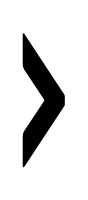
<style>
.page{position:relative;width:88px;height:200px;background:#ffffff}
.page>*{position:absolute;margin:0}
.t1{font:281.6px "Franchise-Bold";color:#000000;scale:0.55 1}
</style>
<div class="page">
<p class="t1" style="left:22px;top:33px;width:43px;height:135px">&gt;</p>
</div>
